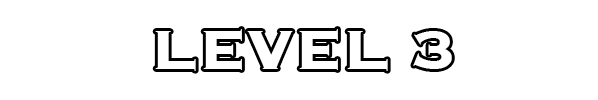
<style>
.page{position:relative;width:598px;height:100px;background:#ffffff}
.page>*{position:absolute;margin:0}
.t1{font:72px "Copperplate-Bold";color:#ffffff}
</style>
<div class="page">
<p class="t1" style="left:155px;top:29px;width:297px;height:42px">LEVEL 3</p>
</div>
